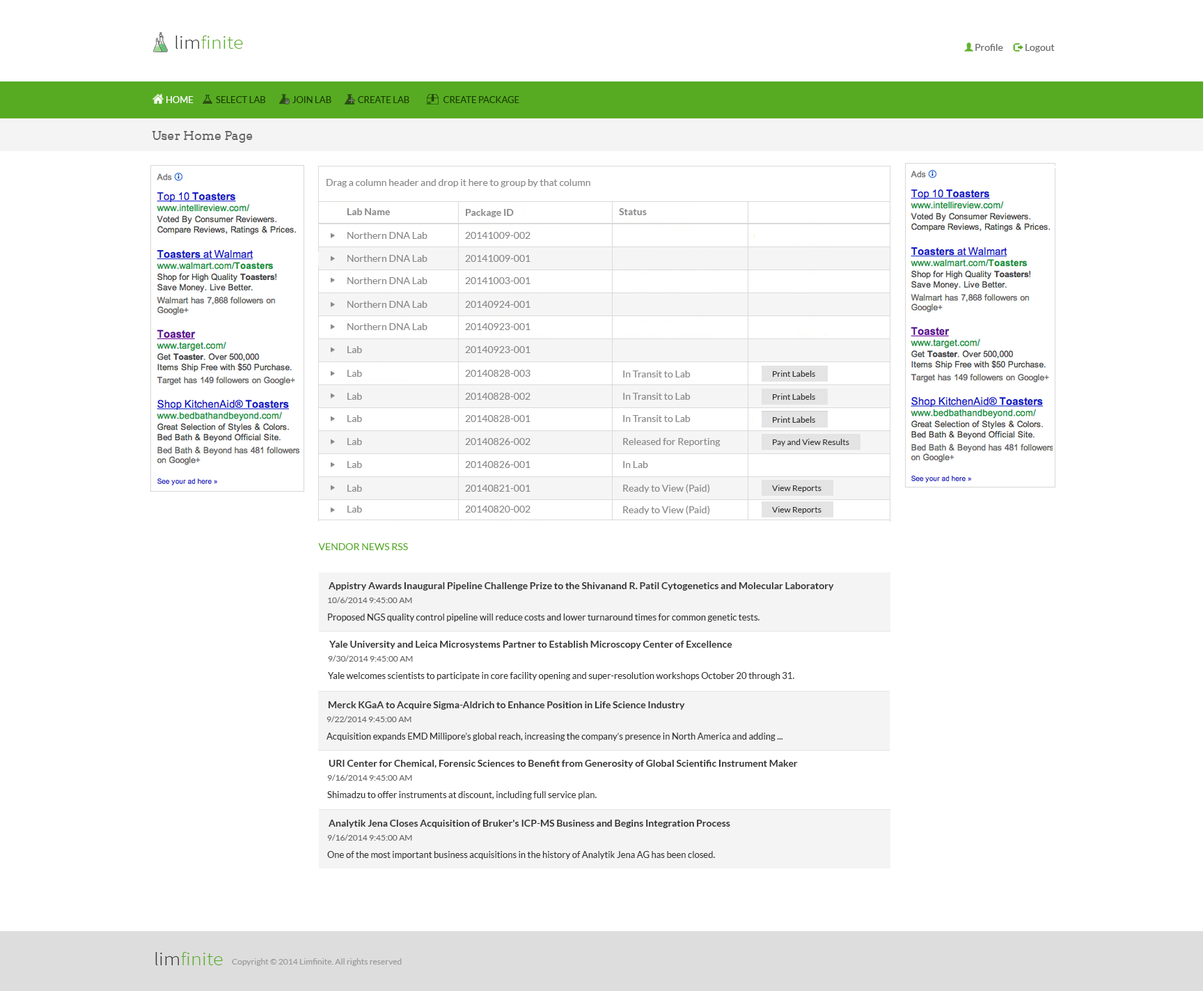
<style>
.page{position:relative;width:1203px;height:991px;background:#ffffff}
.page>*{position:absolute;margin:0}
.t1{font:18.8px "SourceSansPro-Light";color:#57ab22;scale:1.11 1}
.t2{font:18.8px "SourceSansPro-Light";color:#333333;scale:1.11 1}
.t3{font:9.7px "Lato-Regular";color:#666666}
.t4{font:9.1px "Lato-Regular";color:#183d00;text-transform:uppercase}
.t5{font:9.1px "Lato-Regular";color:#fefefe;text-transform:uppercase}
.t6{font:12.5px "Arvo";color:#666666}
.t7{font:9.7px "Lato-Regular";color:#888888}
.t8{font:9.7px "Lato-Bold";color:#888888}
.t9{font:8.4px "Lato-Regular";color:#333333}
.t10{font:8.4px "Lato-Regular"}
.t11{font:9.7px "Lato-Regular";color:#57ab22;text-transform:uppercase}
.t12{font:9.7px "Lato-Bold";color:#333333}
.t13{font:8.4px "Lato-Regular";color:#666666}
.t14{font:9.1px "Lato-Regular";color:#333333}
.t15{font:8.4px "Lato-Regular";color:#999999}
</style>
<div class="page">
<p class="t1" style="left:175px;top:36px;width:68px;height:13px"><span class="t2">lim</span>finite</p>
<p class="t3" style="left:976px;top:44px;width:79px;height:8px">Profile    Logout</p>
<p class="t4" style="left:166px;top:96px;width:353px;height:7px"><span class="t5">Home</span> Select Lab                Join Lab               Create Lab     Create package</p>
<p class="t6" style="left:152px;top:131px;width:101px;height:12px">User Home Page</p>
<p class="t7" style="left:327px;top:179px;width:264px;height:8px">Drag a column header and drop it here to group by that column</p>
<p class="t8" style="left:347px;top:208px;width:44px;height:7px">Lab Name</p>
<p class="t8" style="left:466px;top:209px;width:48px;height:8px">Package ID</p>
<p class="t8" style="left:619px;top:208px;width:28px;height:7px">Status</p>
<p class="t7" style="left:347px;top:232px;width:81px;height:7px">Northern DNA Lab</p>
<p class="t7" style="left:465px;top:232px;width:66px;height:7px">20141009-002</p>
<p class="t7" style="left:347px;top:255px;width:81px;height:7px">Northern DNA Lab</p>
<p class="t7" style="left:465px;top:255px;width:66px;height:7px">20141009-001</p>
<p class="t7" style="left:347px;top:277px;width:81px;height:7px">Northern DNA Lab</p>
<p class="t7" style="left:465px;top:277px;width:66px;height:7px">20141003-001</p>
<p class="t7" style="left:347px;top:301px;width:81px;height:7px">Northern DNA Lab</p>
<p class="t7" style="left:465px;top:301px;width:66px;height:7px">20140924-001</p>
<p class="t7" style="left:347px;top:323px;width:81px;height:7px">Northern DNA Lab</p>
<p class="t7" style="left:465px;top:323px;width:66px;height:7px">20140923-001</p>
<p class="t7" style="left:347px;top:346px;width:15px;height:7px">Lab</p>
<p class="t7" style="left:465px;top:346px;width:66px;height:7px">20140923-001</p>
<p class="t7" style="left:347px;top:370px;width:15px;height:7px">Lab</p>
<p class="t7" style="left:465px;top:370px;width:66px;height:7px">20140828-003</p>
<p class="t7" style="left:623px;top:370px;width:68px;height:7px">In Transit to Lab</p>
<p class="t9" style="left:773px;top:370px;width:42px;height:7px">Print Labels</p>
<p class="t7" style="left:347px;top:393px;width:15px;height:7px">Lab</p>
<p class="t7" style="left:465px;top:393px;width:66px;height:7px">20140828-002</p>
<p class="t7" style="left:623px;top:393px;width:68px;height:7px">In Transit to Lab</p>
<p class="t9" style="left:773px;top:393px;width:42px;height:7px">Print Labels</p>
<p class="t7" style="left:347px;top:415px;width:15px;height:7px">Lab</p>
<p class="t7" style="left:465px;top:415px;width:66px;height:7px">20140828-001</p>
<p class="t7" style="left:623px;top:415px;width:68px;height:7px">In Transit to Lab</p>
<p class="t10" style="left:773px;top:416px;width:42px;height:6px">Print Labels</p>
<p class="t9" style="left:773px;top:416px;width:42px;height:7px">Print Labels</p>
<p class="t7" style="left:347px;top:438px;width:15px;height:7px">Lab</p>
<p class="t7" style="left:465px;top:438px;width:66px;height:7px">20140826-002</p>
<p class="t7" style="left:623px;top:438px;width:98px;height:8px">Released for Reporting</p>
<p class="t9" style="left:773px;top:439px;width:77px;height:7px">Pay and View Results</p>
<p class="t7" style="left:347px;top:461px;width:15px;height:7px">Lab</p>
<p class="t7" style="left:465px;top:461px;width:66px;height:7px">20140826-001</p>
<p class="t7" style="left:623px;top:461px;width:25px;height:7px">In Lab</p>
<p class="t7" style="left:347px;top:485px;width:15px;height:7px">Lab</p>
<p class="t7" style="left:465px;top:485px;width:66px;height:7px">20140821-001</p>
<p class="t7" style="left:623px;top:484px;width:87px;height:10px">Ready to View (Paid)</p>
<p class="t9" style="left:772px;top:485px;width:50px;height:7px">View Reports</p>
<p class="t7" style="left:347px;top:506px;width:15px;height:7px">Lab</p>
<p class="t7" style="left:465px;top:506px;width:66px;height:7px">20140820-002</p>
<p class="t7" style="left:623px;top:506px;width:87px;height:9px">Ready to View (Paid)</p>
<p class="t9" style="left:772px;top:506px;width:50px;height:8px">View Reports</p>
<p class="t11" style="left:318px;top:543px;width:90px;height:7px">Vendor News RSS</p>
<p class="t12" style="left:329px;top:582px;width:505px;height:9px">Appistry Awards Inaugural Pipeline Challenge Prize to the Shivanand R. Patil Cytogenetics and Molecular Laboratory</p>
<p class="t13" style="left:328px;top:597px;width:84px;height:6px">10/6/2014 9:45:00 AM</p>
<p class="t14" style="left:328px;top:614px;width:432px;height:8px">Proposed NGS quality control pipeline will reduce costs and lower turnaround times for common genetic tests.</p>
<p class="t12" style="left:329px;top:641px;width:404px;height:8px">Yale University and Leica Microsystems Partner to Establish Microscopy Center of Excellence</p>
<p class="t13" style="left:328px;top:655px;width:85px;height:7px">9/30/2014 9:45:00 AM</p>
<p class="t14" style="left:328px;top:672px;width:467px;height:8px">Yale welcomes scientists to participate in core facility opening and super-resolution workshops October 20 through 31.</p>
<p class="t12" style="left:328px;top:701px;width:357px;height:9px">Merck KGaA to Acquire Sigma-Aldrich to Enhance Position in Life Science Industry</p>
<p class="t13" style="left:327px;top:716px;width:85px;height:6px">9/22/2014 9:45:00 AM</p>
<p class="t14" style="left:327px;top:733px;width:456px;height:8px">Acquisition expands EMD Millipore’s global reach, increasing the company’s presence in North America and adding ...</p>
<p class="t12" style="left:329px;top:760px;width:469px;height:8px">URI Center for Chemical, Forensic Sciences to Benefit from Generosity of Global Scientific Instrument Maker</p>
<p class="t13" style="left:327px;top:774px;width:85px;height:7px">9/16/2014 9:45:00 AM</p>
<p class="t14" style="left:327px;top:791px;width:270px;height:8px">Shimadzu to offer instruments at discount, including full service plan.</p>
<p class="t12" style="left:329px;top:820px;width:401px;height:8px">Analytik Jena Closes Acquisition of Bruker's ICP-MS Business and Begins Integration Process</p>
<p class="t13" style="left:327px;top:834px;width:85px;height:7px">9/16/2014 9:45:00 AM</p>
<p class="t14" style="left:327px;top:851px;width:388px;height:8px">One of the most important business acquisitions in the history of Analytik Jena AG has been closed.</p>
<p class="t1" style="left:155px;top:952px;width:68px;height:13px"><span class="t2">lim</span>finite</p>
<p class="t15" style="left:232px;top:958px;width:170px;height:8px">Copyright © 2014 Limfinite. All rights reserved</p>
</div>
